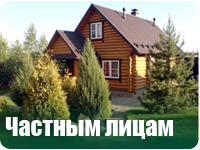
<style>
.page{position:relative;width:200px;height:150px}
.page>*{position:absolute;margin:0}
.t1{font:24px "Impact";color:#fefefe}
</style>
<div class="page">
<p class="t1" style="left:5px;top:117px;width:168px;height:22px">Частным лицам</p>
</div>
